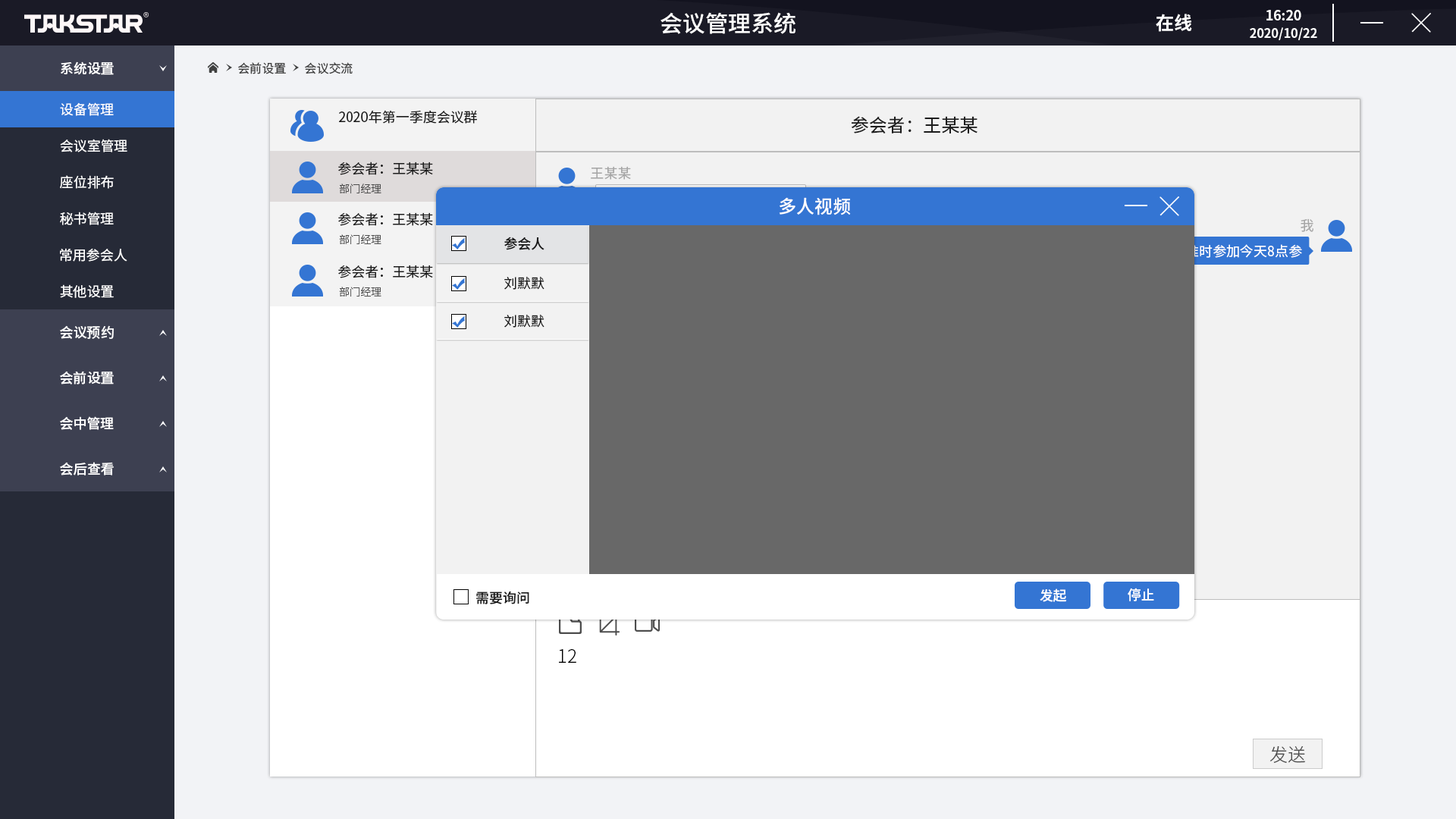
<style>
.page{position:relative;width:1456px;height:819px}
.page>*{position:absolute;margin:0}
.t1{font:22.7px "SourceHanSansCN-Medium";color:#ffffff}
.t2{font:18.2px "SourceHanSansCN-Bold";color:#ffffff}
.t3{font:12.6px/17.2px "SourceHanSansCN-Bold";letter-spacing:-0.01em;color:#fefefe}
.t4{font:13.8px/17.2px "SourceHanSansCN-Bold";letter-spacing:-0.01em;color:#fefefe}
.t5{font:13.6px "SourceHanSansCN-Medium";color:#ffffff}
.t6{font:12.1px "SourceHanSansCN-Regular";color:#404040}
.t7{font:13.6px "SourceHanSansCN-Regular";color:#ffffff}
.t8{font:13.6px "SourceHanSansCN-Regular";color:#1a1a1a}
.t9{font:18.2px "SourceHanSansCN-Regular";color:#1d1d1d}
.t10{font:13.6px "SourceHanSansCN-Regular";color:#1d1d1d}
.t11{font:13.6px "SourceHanSansCN-Regular";color:#a6a6a6}
.t12{font:10.6px "SourceHanSansCN-Light";color:#4d4d4d}
.t13{font:18.2px "SourceHanSansCN-Medium";color:#ffffff}
.t14{font:13.7px "SourceHanSansCN-Regular";color:#a6a6a6}
.t15{font:13.6px "SourceHanSansCN-Medium";color:#1a1a1a}
.t16{font:13.7px "SourceHanSansCN-Regular"}
.t17{font:18.2px "SourceHanSansCN-Light";color:#000000}
.t18{font:18.2px "SourceHanSansCN-Light";color:#4d4d4d}
</style>
<div class="page">
<p class="t1" style="left:660px;top:12px;width:135px;height:22px">会议管理系统</p>
<p class="t2" style="left:1156px;top:14px;width:36px;height:18px">在线</p>
<p class="t3" style="left:1250px;top:10px;width:67px;height:30px;text-align:center"><span class="t4">16:20<br></span>2020/10/22</p>
<p class="t5" style="left:61px;top:61px;width:53px;height:14px">系统设置</p>
<p class="t6" style="left:238px;top:62px;width:48px;height:12px">会前设置</p>
<p class="t6" style="left:305px;top:62px;width:48px;height:12px">会议交流</p>
<p class="t7" style="left:60px;top:102px;width:54px;height:14px">设备管理</p>
<p class="t8" style="left:339px;top:110px;width:138px;height:14px">2020年第一季度会议群</p>
<p class="t9" style="left:851px;top:116px;width:126px;height:17px">参会者：王某某</p>
<p class="t7" style="left:60px;top:139px;width:67px;height:13px">会议室管理</p>
<p class="t10" style="left:338px;top:162px;width:95px;height:13px">参会者：王某某</p>
<p class="t11" style="left:591px;top:166px;width:40px;height:14px">王某某</p>
<p class="t7" style="left:60px;top:175px;width:54px;height:14px">座位排布</p>
<p class="t12" style="left:339px;top:184px;width:42px;height:9px">部门经理</p>
<p class="t13" style="left:779px;top:197px;width:72px;height:18px">多人视频</p>
<p class="t7" style="left:60px;top:212px;width:54px;height:13px">秘书管理</p>
<p class="t10" style="left:338px;top:212px;width:95px;height:14px">参会者：王某某</p>
<p class="t14" style="left:1301px;top:218px;width:12px;height:14px">我</p>
<p class="t12" style="left:339px;top:234px;width:42px;height:10px">部门经理</p>
<p class="t15" style="left:504px;top:237px;width:40px;height:13px">参会人</p>
<p class="t16" style="left:1117px;top:244px;width:185px;height:15px">好的，我会准时参加今天8点参</p>
<p class="t7" style="left:60px;top:248px;width:67px;height:14px">常用参会人</p>
<p class="t10" style="left:338px;top:265px;width:95px;height:13px">参会者：王某某</p>
<p class="t8" style="left:504px;top:276px;width:40px;height:14px">刘默默</p>
<p class="t7" style="left:60px;top:284px;width:54px;height:14px">其他设置</p>
<p class="t12" style="left:339px;top:287px;width:42px;height:10px">部门经理</p>
<p class="t8" style="left:504px;top:314px;width:40px;height:14px">刘默默</p>
<p class="t5" style="left:60px;top:325px;width:54px;height:14px">会议预约</p>
<p class="t5" style="left:60px;top:371px;width:54px;height:13px">会前设置</p>
<p class="t5" style="left:60px;top:416px;width:54px;height:14px">会中管理</p>
<p class="t5" style="left:60px;top:462px;width:54px;height:13px">会后查看</p>
<p class="t15" style="left:476px;top:591px;width:53px;height:13px">需要询问</p>
<p class="t5" style="left:1040px;top:588px;width:27px;height:14px">发起</p>
<p class="t5" style="left:1128px;top:588px;width:26px;height:13px">停止</p>
<p class="t17" style="left:559px;top:649px;width:17px;height:14px">12</p>
<p class="t18" style="left:1269px;top:746px;width:36px;height:17px">发送</p>
</div>
